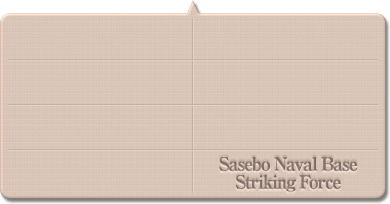
<style>
.page{position:relative;width:390px;height:204px}
.page>*{position:absolute;margin:0}
.t1{font:18px/18px "RyuminPro-ExBold";letter-spacing:-0.08em;color:#85746c}
</style>
<div class="page">
<p class="t1" style="left:219px;top:157px;width:139px;height:35px;text-align:center">Sasebo Naval Base<br>Striking Force</p>
</div>
